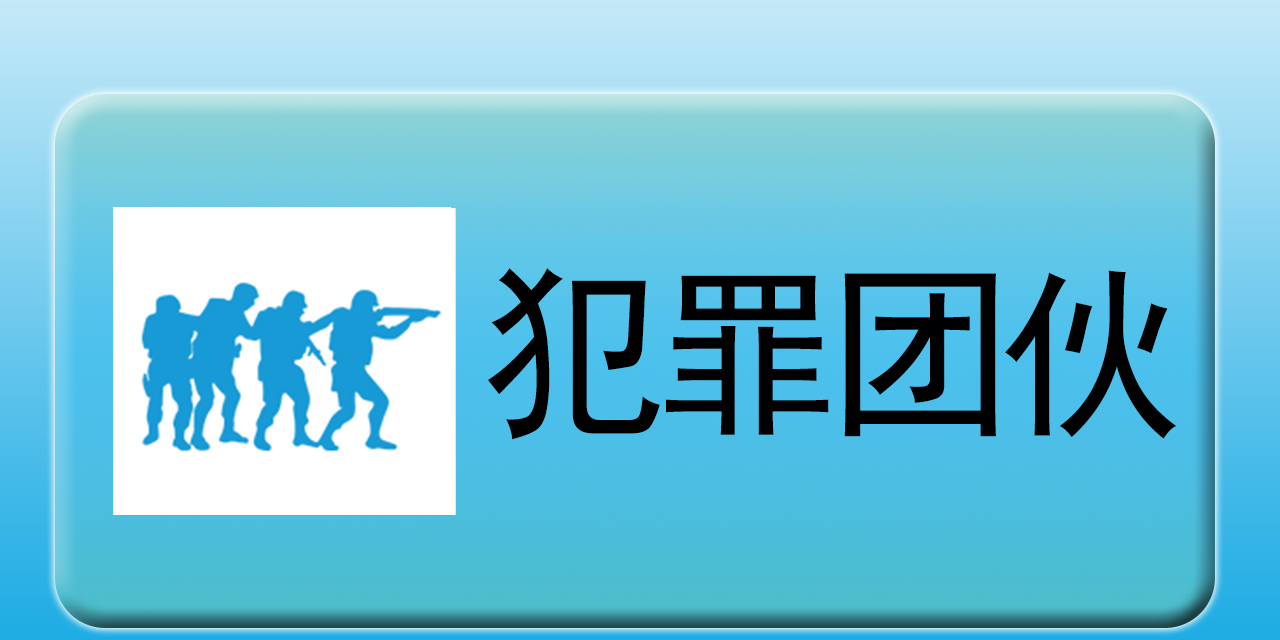
<style>
.page{position:relative;width:1280px;height:640px}
.page>*{position:absolute;margin:0}
.t1{font:186.7px "SimHei";letter-spacing:-0.078em;color:#000000}
</style>
<div class="page">
<p class="t1" style="left:488px;top:268px;width:688px;height:172px">犯罪团伙</p>
</div>
